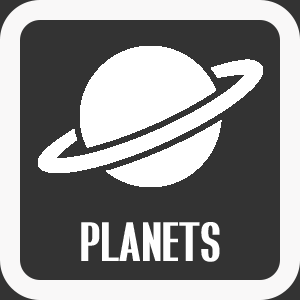
<style>
.page{position:relative;width:300px;height:300px;background:#333333}
.page>*{position:absolute;margin:0}
.t1{font:55px "BluefishDemo-Bold";color:#ffffff}
</style>
<div class="page">
<p class="t1" style="left:81px;top:222px;width:139px;height:40px">PLANETS</p>
</div>
